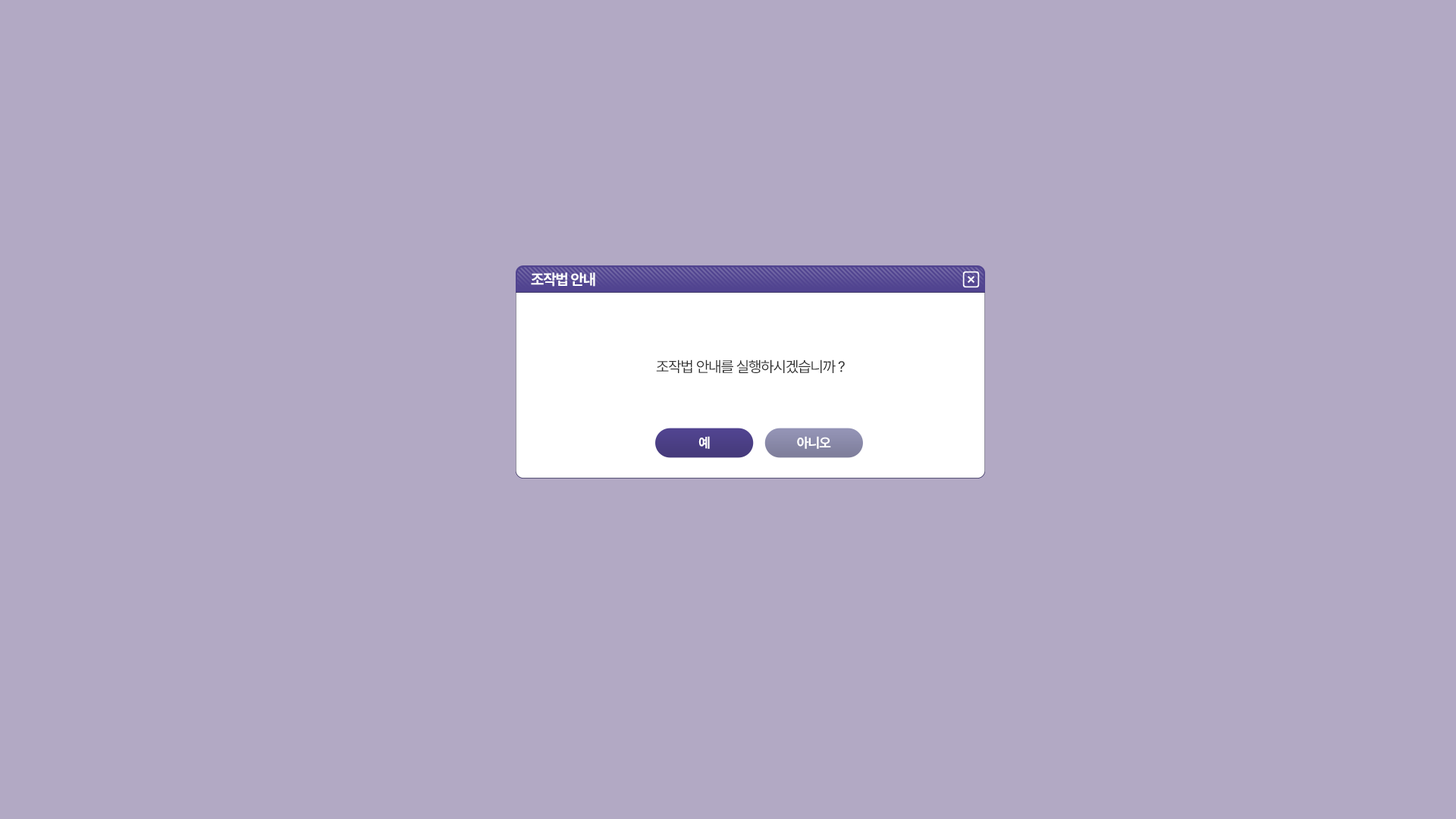
<style>
.page{position:relative;width:1456px;height:819px;background:#b2a9c4}
.page>*{position:absolute;margin:0}
.t1{font:15.2px "Pretendard-Bold";letter-spacing:-0.05em;color:#ffffff;text-transform:uppercase}
.t2{font:15.2px "Pretendard-Regular";letter-spacing:-0.05em;color:#303030;text-transform:uppercase}
.t3{font:13.7px "Pretendard-Bold";letter-spacing:-0.05em;color:#ffffff;text-transform:uppercase}
</style>
<div class="page">
<p class="t1" style="left:531px;top:272px;width:64px;height:15px">조작법 안내</p>
<p class="t2" style="left:656px;top:359px;width:189px;height:15px">조작법 안내를 실행하시겠습니까 ?</p>
<p class="t3" style="left:698px;top:436px;width:12px;height:13px">예</p>
<p class="t3" style="left:797px;top:436px;width:34px;height:13px">아니오</p>
</div>
